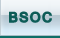
<style>
.page{position:relative;width:60px;height:38px}
.page>*{position:absolute;margin:0}
.t1{font:14px "Kartika-Bold";letter-spacing:0.02em;color:#0d5c57;font-weight:bold}
</style>
<div class="page">
<p class="t1" style="left:9px;top:11px;width:43px;height:12px">BSOC</p>
</div>
